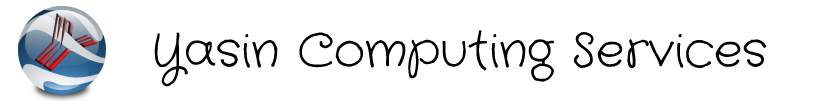
<style>
.page{position:relative;width:827px;height:109px;background:#ffffff}
.page>*{position:absolute;margin:0}
.t1{font:48px "CraftyGirls-Regular";color:#000000}
</style>
<div class="page">
<p class="t1" style="left:154px;top:30px;width:613px;height:57px">Yasin Computing Services</p>
</div>
